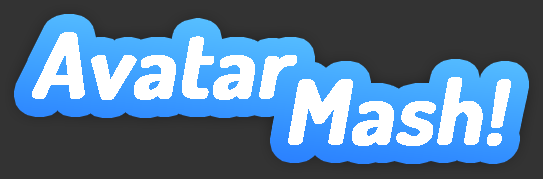
<style>
.page{position:relative;width:543px;height:179px;background:#333333}
.page>*{position:absolute;margin:0}
.t1{font:90px/46px "Dosis-Bold";color:#ffffff;font-weight:bold;font-style:italic}
</style>
<div class="page">
<p class="t1" style="left:32px;top:32px;width:479px;height:114px">Avatar<br>       Mash!</p>
</div>
